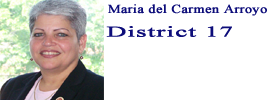
<style>
.page{position:relative;width:276px;height:100px;background:#ffffff}
.page>*{position:absolute;margin:0}
.t1{font:12px "TimesNewRomanPSMT";letter-spacing:0.02em;color:#0d0d7a;font-weight:bold;scale:1.17 1}
.t2{font:14.5px "TimesNewRomanPSMT";letter-spacing:0.02em;color:#0d0d7a;font-weight:bold;scale:1.86 1}
</style>
<div class="page">
<p class="t1" style="left:108px;top:4px;width:159px;height:12px">Maria del Carmen Arroyo</p>
<p class="t2" style="left:106px;top:26px;width:126px;height:11px">District 17</p>
</div>
